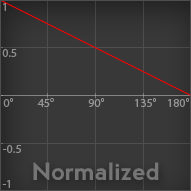
<style>
.page{position:relative;width:191px;height:191px;background:#383838}
.page>*{position:absolute;margin:0}
.t1{font:12px "MyriadPro-Regular";color:#8b8b8b}
.t2{font:12px "MyriadPro-Regular";color:#919191}
.t3{font:12px "MyriadPro-Regular";color:#909090}
.t4{font:12px "MyriadPro-Regular";color:#969696}
.t5{font:12px "MyriadPro-Regular";color:#949494}
.t6{font:24px "nevis-Bold";color:#757575}
.t7{font:12px "MyriadPro-Regular";color:#8f8f8f}
</style>
<div class="page">
<p class="t1" style="left:3px;top:3px;width:3px;height:8px">1</p>
<p class="t2" style="left:2px;top:49px;width:15px;height:8px">0.5</p>
<p class="t3" style="left:3px;top:98px;width:10px;height:9px">0°</p>
<p class="t4" style="left:37px;top:98px;width:17px;height:9px">45°</p>
<p class="t4" style="left:88px;top:98px;width:16px;height:9px">90°</p>
<p class="t4" style="left:135px;top:98px;width:21px;height:9px">135°</p>
<p class="t5" style="left:168px;top:98px;width:21px;height:9px">180°</p>
<p class="t2" style="left:3px;top:145px;width:18px;height:8px">-0.5</p>
<p class="t6" style="left:33px;top:162px;width:126px;height:18px">Normalized</p>
<p class="t7" style="left:2px;top:180px;width:8px;height:8px">-1</p>
</div>
